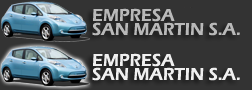
<style>
.page{position:relative;width:252px;height:90px;background:#333333}
.page>*{position:absolute;margin:0}
.t1{font:18px/14px "ErasITC-Demi";color:#b9b9b9}
.t2{font:18px/14px "ErasITC-Demi";color:#fefefe}
</style>
<div class="page">
<p class="t1" style="left:92px;top:8px;width:148px;height:28px">EMPRESA <br>SAN MARTIN S.A.</p>
<p class="t2" style="left:92px;top:53px;width:148px;height:28px">EMPRESA <br>SAN MARTIN S.A.</p>
</div>
